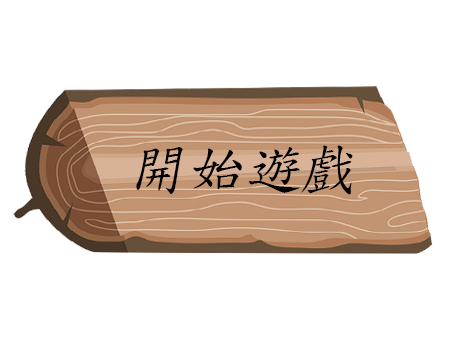
<style>
.page{position:relative;width:454px;height:340px;background:#ffffff}
.page>*{position:absolute;margin:0}
.t1{font:56px "DFKaiShu-SB-Estd-BF";letter-spacing:0.025em;color:#000000;font-style:italic}
</style>
<div class="page">
<p class="t1" style="left:136px;top:145px;width:217px;height:50px">開始遊戲</p>
</div>
